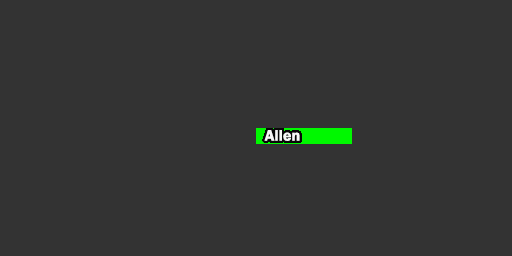
<style>
.page{position:relative;width:512px;height:256px;background:#333333}
.page>*{position:absolute;margin:0}
.t1{font:12px "FranklinGothic-Demi";color:#f8f8f8}
</style>
<div class="page">
<p class="t1" style="left:264px;top:130px;width:36px;height:11px">Allen</p>
</div>
